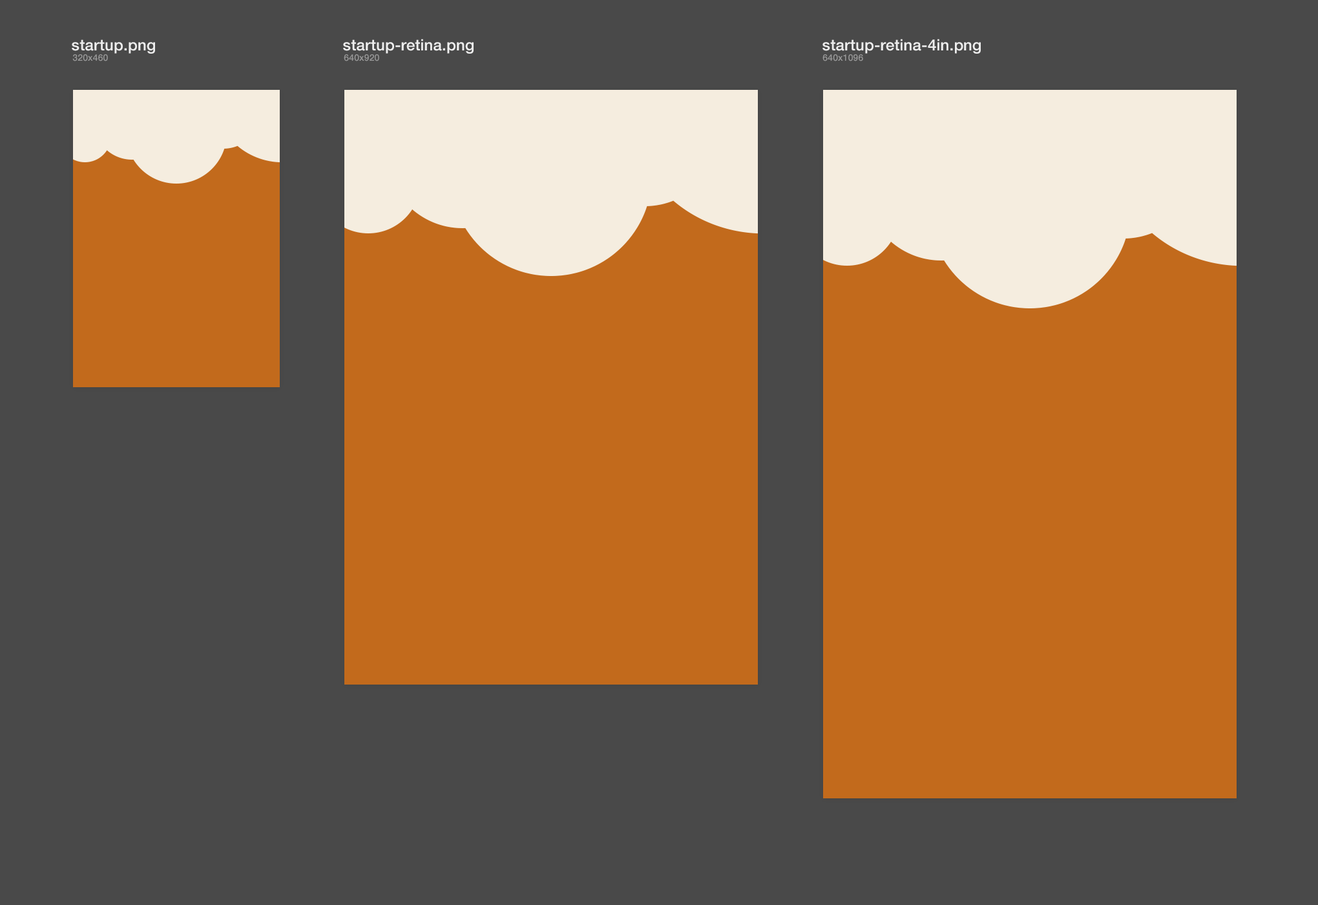
<style>
.page{position:relative;width:1318px;height:905px;background:#494949}
.page>*{position:absolute;margin:0}
.t1{font:15.5px "HelveticaNeue-Medium";letter-spacing:0.01em;color:#eeeeee}
.t2{font:9px "HelveticaNeue-Medium";letter-spacing:0.01em;color:#999999}
</style>
<div class="page">
<p class="t1" style="left:72px;top:39px;width:83px;height:15px">startup.png</p>
<p class="t1" style="left:343px;top:39px;width:131px;height:15px">startup-retina.png</p>
<p class="t1" style="left:823px;top:39px;width:158px;height:15px">startup-retina-4in.png</p>
<p class="t2" style="left:72px;top:54px;width:36px;height:7px">320x460</p>
<p class="t2" style="left:344px;top:54px;width:35px;height:7px">640x920</p>
<p class="t2" style="left:823px;top:54px;width:40px;height:7px">640x1096</p>
</div>
